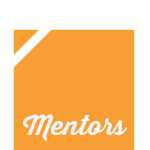
<style>
.page{position:relative;width:150px;height:150px;background:#f79e34}
.page>*{position:absolute;margin:0}
.t1{font:27px "ThirstyScript-Bold";color:#f6f6f6}
</style>
<div class="page">
<p class="t1" style="left:23px;top:114px;width:104px;height:27px">Mentors</p>
</div>
